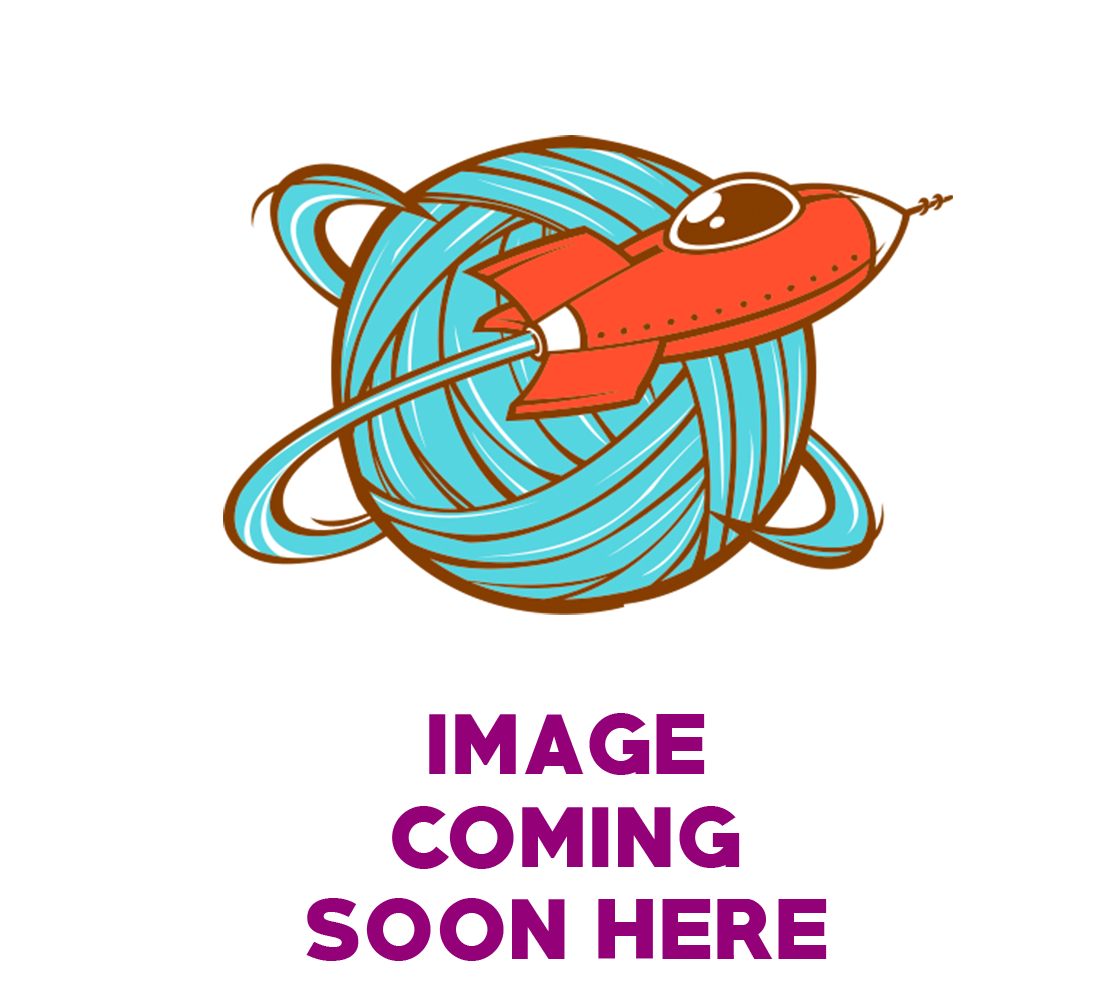
<style>
.page{position:relative;width:1100px;height:1000px;background:#ffffff}
.page>*{position:absolute;margin:0}
.t1{font:77px "PRIMETIME-Regular";color:#940078}
</style>
<div class="page">
<p class="t1" style="left:306px;top:713px;width:521px;height:248px;text-align:center">IMAGE <br>COMING <br>SOON HERE</p>
</div>
